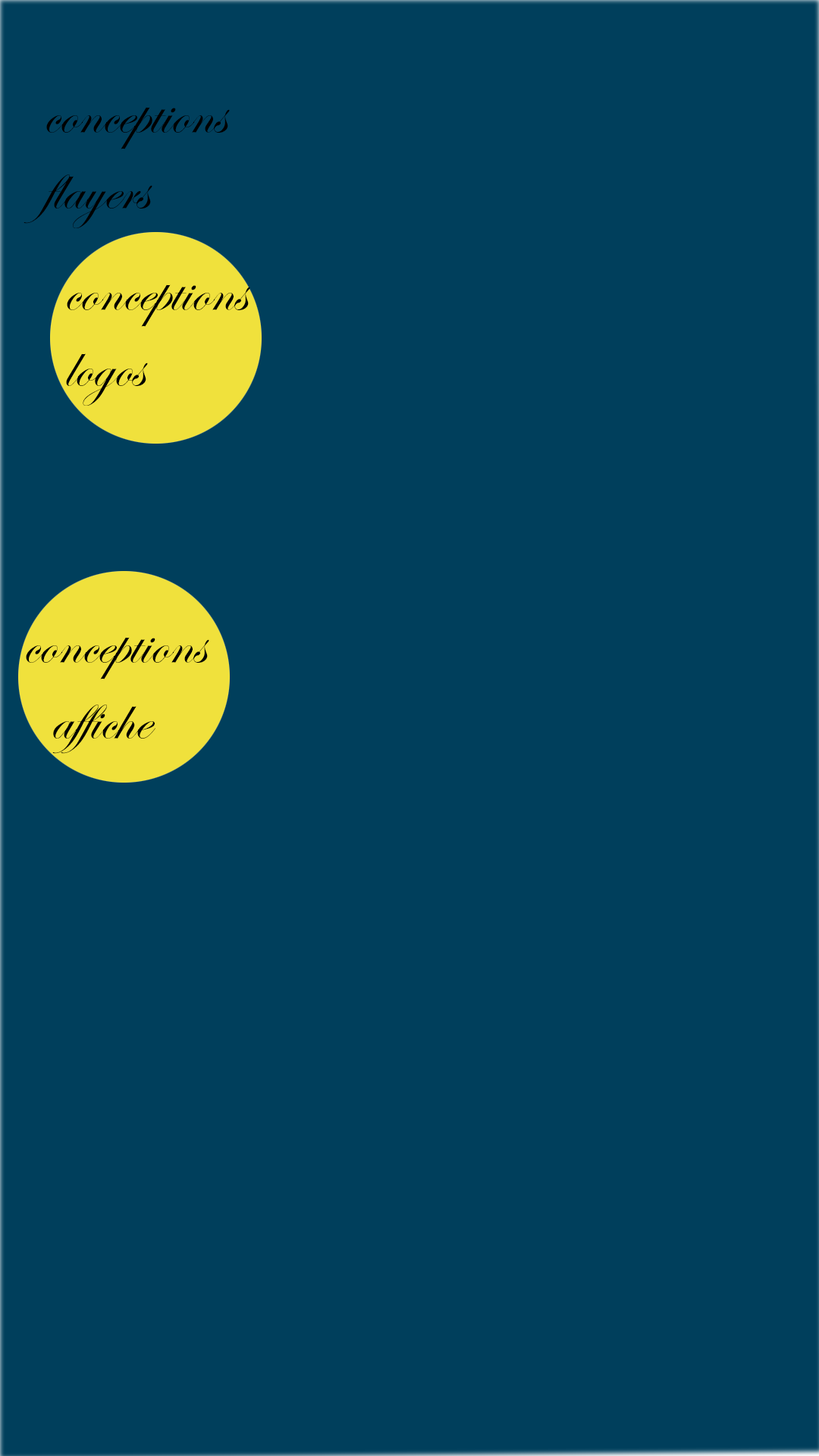
<style>
.page{position:relative;width:819px;height:1456px;background:#003f5c}
.page>*{position:absolute;margin:0}
.t1{font:63px "EdwardianScriptITC";color:#000000}
</style>
<div class="page">
<p class="t1" style="left:24px;top:107px;width:206px;height:121px">conceptions <br>flayers</p>
<p class="t1" style="left:66px;top:284px;width:184px;height:122px">conceptions <br>logos</p>
<p class="t1" style="left:26px;top:637px;width:183px;height:117px">conceptions <br> affiche</p>
</div>
